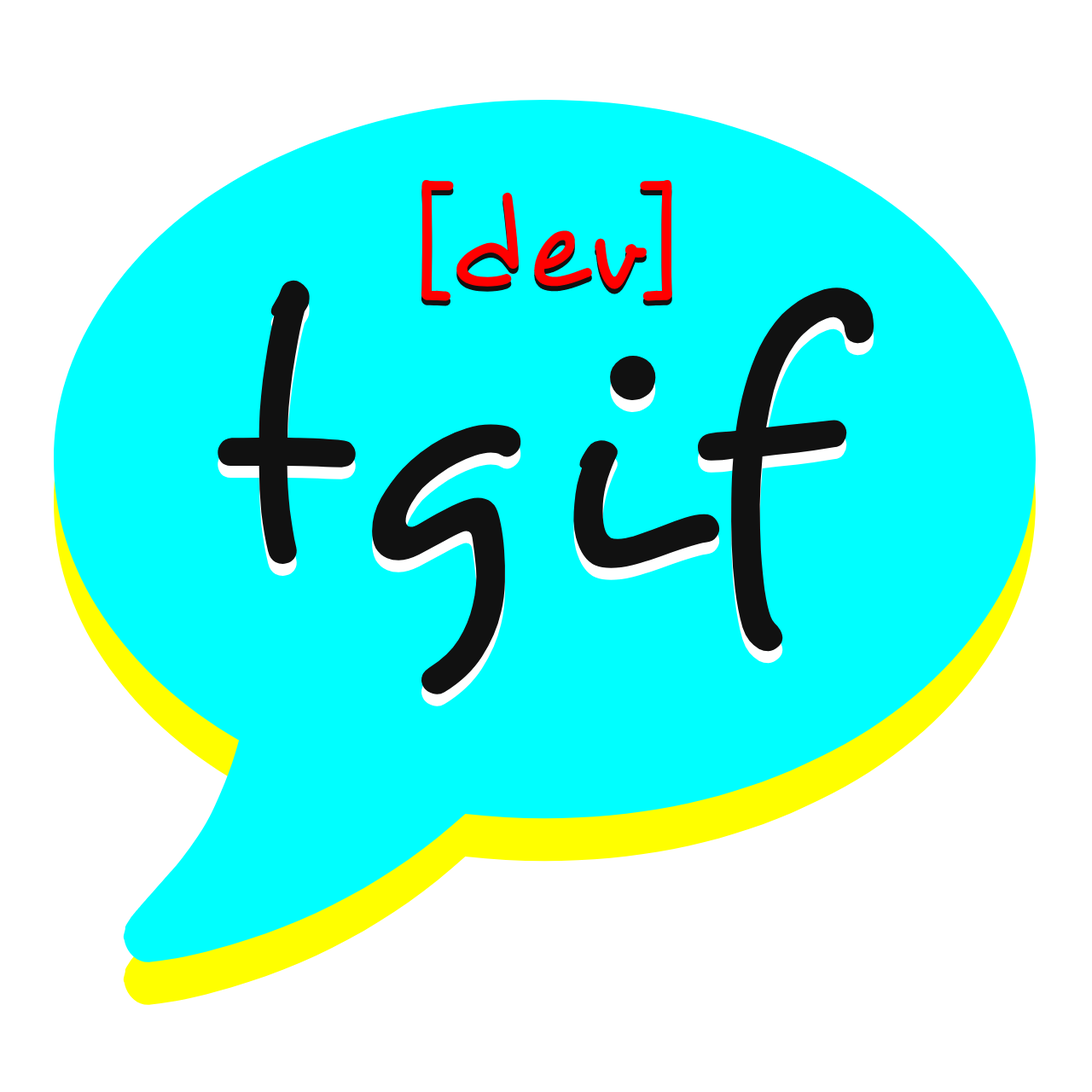
<style>
.page{position:relative;width:1092px;height:1092px;background:#ffffff}
.page>*{position:absolute;margin:0}
.t1{font:127.1px "Desyrel";color:#ff0000}
.t2{font:375.4px "Desyrel";color:#111111}
</style>
<div class="page">
<p class="t1" style="left:421px;top:184px;width:251px;height:122px">[dev]</p>
<p class="t1" style="left:421px;top:179px;width:251px;height:122px">[dev]</p>
<p class="t2" style="left:218px;top:279px;width:656px;height:417px">tgif</p>
<p class="t2" style="left:218px;top:291px;width:656px;height:417px">tgif</p>
</div>
